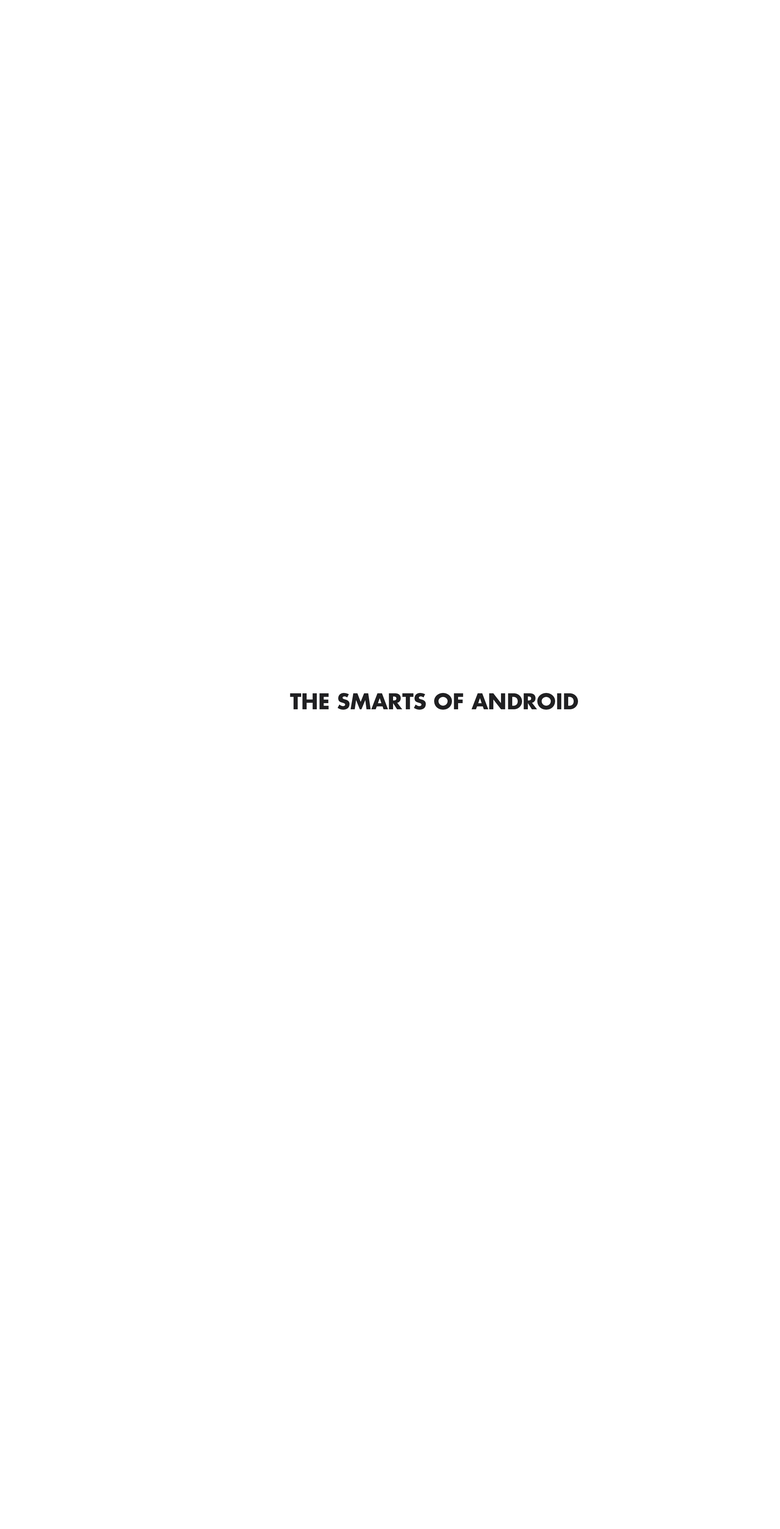
<style>
.page{position:relative;width:780px;height:1529px;background:#ffffff}
.page>*{position:absolute;margin:0}
.t1{font:21.2px "FuturaStd-Bold";color:#202022;text-transform:uppercase}
</style>
<div class="page">
<p class="t1" style="left:290px;top:693px;width:288px;height:17px">The smarts of Android</p>
</div>
